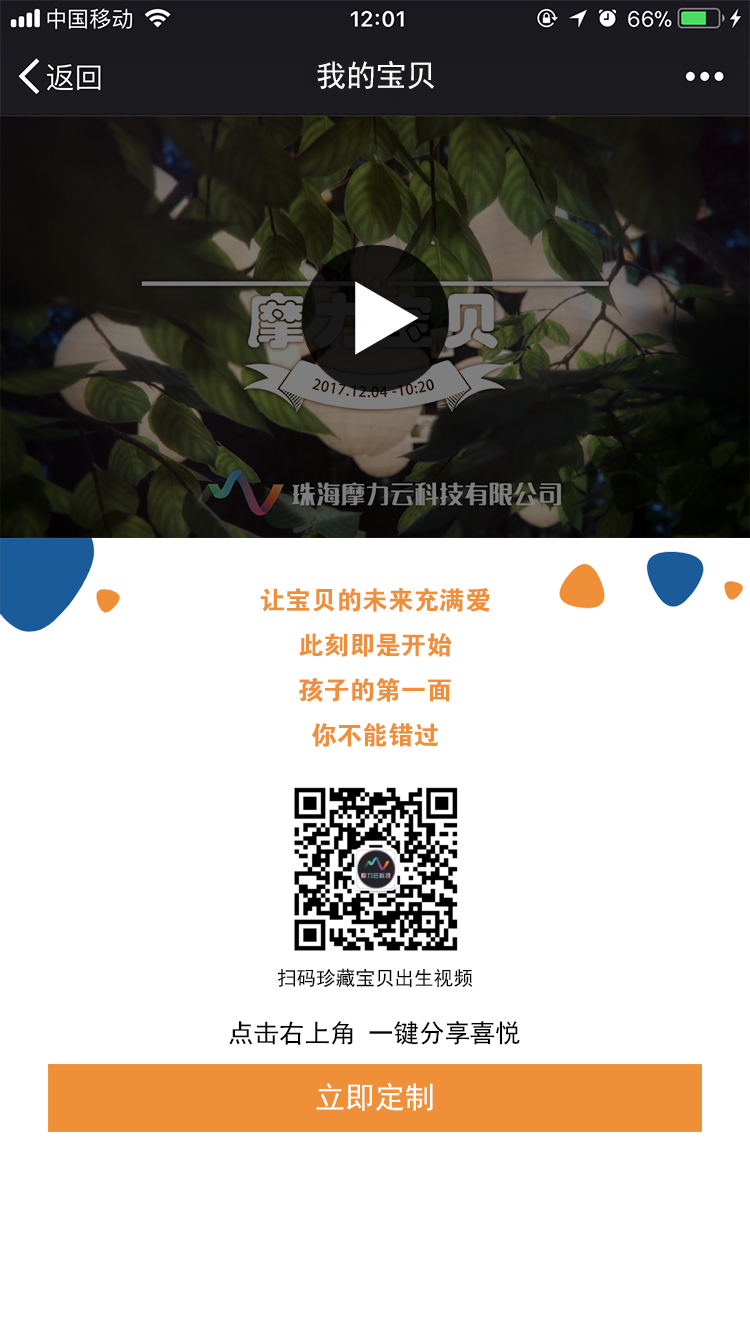
<style>
.page{position:relative;width:750px;height:1334px;background:#ffffff}
.page>*{position:absolute;margin:0}
.t1{font:30.5px "SimHei";color:#ffffff}
.t2{font:25.7px "FZDHTJW--GB1-0";color:#ef8f39}
.t3{font:19.7px "SimHei";color:#000000}
.t4{font:25.6px "SimHei";color:#000000}
</style>
<div class="page">
<p class="t1" style="left:317px;top:60px;width:117px;height:29px">我的宝贝</p>
<p class="t2" style="left:260px;top:588px;width:230px;height:159px;text-align:center">让宝贝的未来充满爱<br>此刻即是开始<br>孩子的第一面<br>你不能错过</p>
<p class="t3" style="left:277px;top:968px;width:196px;height:20px">扫码珍藏宝贝出生视频</p>
<p class="t4" style="left:229px;top:1021px;width:291px;height:24px">点击右上角 一键分享喜悦</p>
<p class="t1" style="left:316px;top:1082px;width:117px;height:29px">立即定制</p>
</div>
